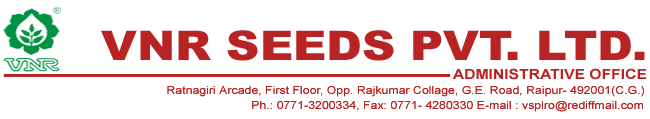
<style>
.page{position:relative;width:650px;height:119px;background:#ffffff}
.page>*{position:absolute;margin:0}
.t1{font:41px "Arial-Black";color:#b82424;scale:1.12 1}
.t2{font:14px "Arial-BoldMT";color:#b82424;scale:1.12 1}
.t3{font:11px "ArialMT";color:#b82424;scale:1.12 1}
</style>
<div class="page">
<p class="t1" style="left:101px;top:30px;width:544px;height:31px">VNR SEEDS PVT. LTD.</p>
<p class="t2" style="left:452px;top:68px;width:195px;height:12px">ADMINISTRATIVE OFFICE</p>
<p class="t3" style="left:167px;top:86px;width:477px;height:11px">Ratnagiri Arcade, First Floor, Opp. Rajkumar Collage, G.E. Road, Raipur- 492001(C.G.)</p>
<p class="t3" style="left:252px;top:101px;width:391px;height:11px">Ph.: 0771-3200334, Fax: 0771- 4280330 E-mail : vsplro@rediffmail.com</p>
</div>
